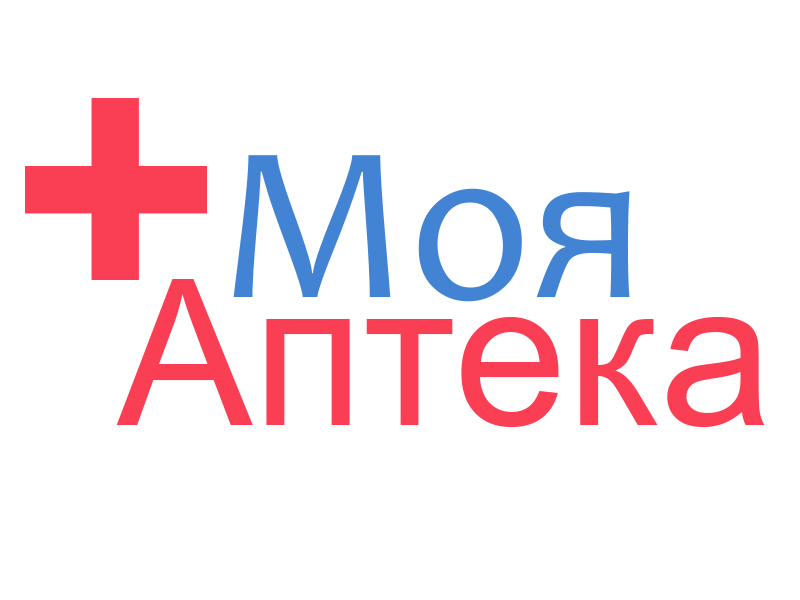
<style>
.page{position:relative;width:800px;height:600px;background:#ffffff}
.page>*{position:absolute;margin:0}
.t1{font:222.6px "Candara";color:#4284d3}
.t2{font:203.1px "ArialMT";color:#fa3e54}
</style>
<div class="page">
<p class="t1" style="left:233px;top:155px;width:397px;height:147px">Моя</p>
<p class="t2" style="left:116px;top:279px;width:649px;height:148px">Аптека</p>
</div>
